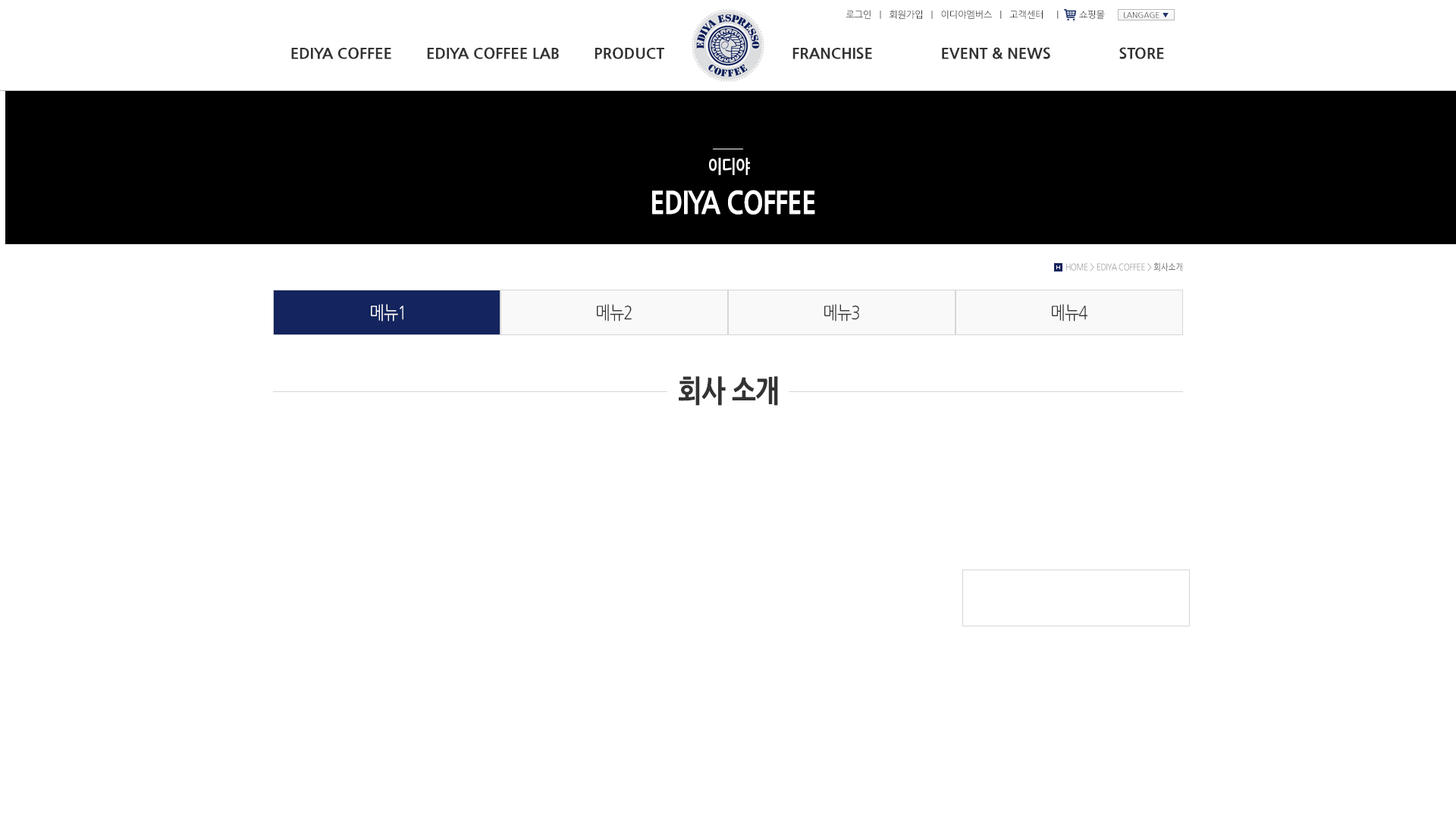
<style>
.page{position:relative;width:1456px;height:819px;background:#ffffff}
.page>*{position:absolute;margin:0}
.t1{font:9.1px "NanumGothic";color:#333333}
.t2{font:7.6px "NanumGothic";color:#333333}
.t3{font:7.6px "NanumGothic";color:#1d326c}
.t4{font:15.2px "NanumGothicExtraBold";color:#333333}
.t5{font:18.2px "NanumGothicBold";letter-spacing:-0.03em;color:#ffffff;scale:0.85 1}
.t6{font:30.3px "NanumGothicExtraBold";letter-spacing:-0.03em;color:#ffffff;scale:0.85 1}
.t7{font:9.1px "NanumGothic";letter-spacing:-0.03em;color:#989898;scale:0.85 1}
.t8{font:9.1px "NanumGothic";letter-spacing:-0.03em;color:#333333;scale:0.85 1}
.t9{font:18.2px "NanumGothic";letter-spacing:-0.03em;color:#ffffff;scale:0.85 1}
.t10{font:18.2px "NanumGothic";letter-spacing:-0.03em;color:#333333;scale:0.85 1}
.t11{font:30.3px "NanumGothicExtraBold";letter-spacing:-0.03em;color:#333333;scale:0.85 1}
</style>
<div class="page">
<p class="t1" style="left:846px;top:10px;width:259px;height:9px">로그인   |   회원가입   |   이디야멤버스   |   고객센터     |        쇼핑몰</p>
<p class="t2" style="left:1124px;top:12px;width:45px;height:6px">LANGAGE <span class="t3">▼</span></p>
<p class="t4" style="left:291px;top:47px;width:873px;height:12px">EDIYA COFFEE        EDIYA COFFEE LAB        PRODUCT                              FRANCHISE                EVENT &amp; NEWS                STORE</p>
<p class="t5" style="left:709px;top:158px;width:41px;height:17px">이디야</p>
<p class="t6" style="left:652px;top:190px;width:163px;height:25px">EDIYA COFFEE</p>
<p class="t7" style="left:1066px;top:262px;width:116px;height:9px">HOME &gt; EDIYA COFFEE &gt; <span class="t8">회사소개</span></p>
<p class="t9" style="left:371px;top:304px;width:32px;height:18px">메뉴1</p>
<p class="t10" style="left:597px;top:304px;width:35px;height:18px">메뉴2</p>
<p class="t10" style="left:824px;top:304px;width:35px;height:18px">메뉴3</p>
<p class="t10" style="left:1052px;top:304px;width:35px;height:18px">메뉴4</p>
<p class="t11" style="left:679px;top:376px;width:99px;height:30px">회사 소개</p>
</div>
